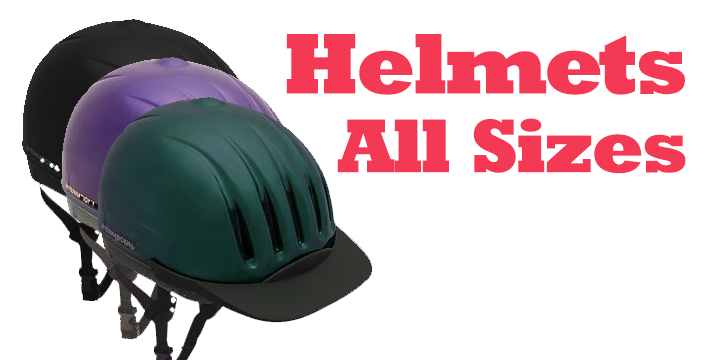
<style>
.page{position:relative;width:720px;height:360px;background:#ffffff}
.page>*{position:absolute;margin:0}
.t1{font:77px/6px "RockwellStd-ExtraBold";letter-spacing:-0.04em;color:#f43955}
.t2{font:87.2px/72.7px "RockwellStd-ExtraBold";letter-spacing:-0.04em;color:#f43955}
.t3{font:87.2px/72.7px "RockwellStd-ExtraBold";letter-spacing:-0.06em;color:#f43955}
</style>
<div class="page">
<p class="t1" style="left:286px;top:34px;width:400px;height:140px;text-align:right"><span class="t2">Hel</span><span class="t3">me</span><span class="t2">ts<br><br></span>All Sizes</p>
</div>
